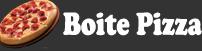
<style>
.page{position:relative;width:202px;height:51px;background:#333333}
.page>*{position:absolute;margin:0}
.t1{font:33px "CooperBlack";color:#ffffff;scale:0.76 1}
</style>
<div class="page">
<p class="t1" style="left:63px;top:12px;width:139px;height:24px">Boite Pizza</p>
</div>
